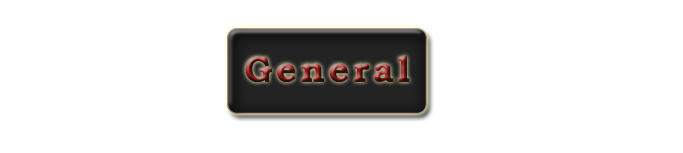
<style>
.page{position:relative;width:683px;height:153px;background:#ffffff}
.page>*{position:absolute;margin:0}
.t1{font:36px "BookmanOldStyle-Bold";letter-spacing:0.1em}
</style>
<div class="page">
<p class="t1" style="left:245px;top:56px;width:165px;height:27px">General</p>
</div>
